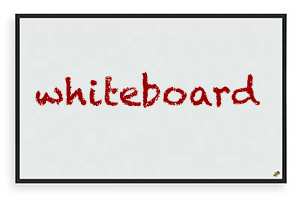
<style>
.page{position:relative;width:300px;height:206px;background:#e5e9e8}
.page>*{position:absolute;margin:0}
.t1{font:36px "Chalkduster";color:#990000}
</style>
<div class="page">
<p class="t1" style="left:35px;top:71px;width:225px;height:37px">whiteboard</p>
</div>
